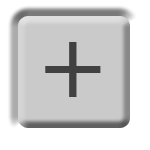
<style>
.page{position:relative;width:150px;height:150px;background:#cacaca}
.page>*{position:absolute;margin:0}
.t1{font:90px "Verdana";color:#414141}
</style>
<div class="page">
<p class="t1" style="left:45px;top:42px;width:56px;height:55px">+</p>
</div>
